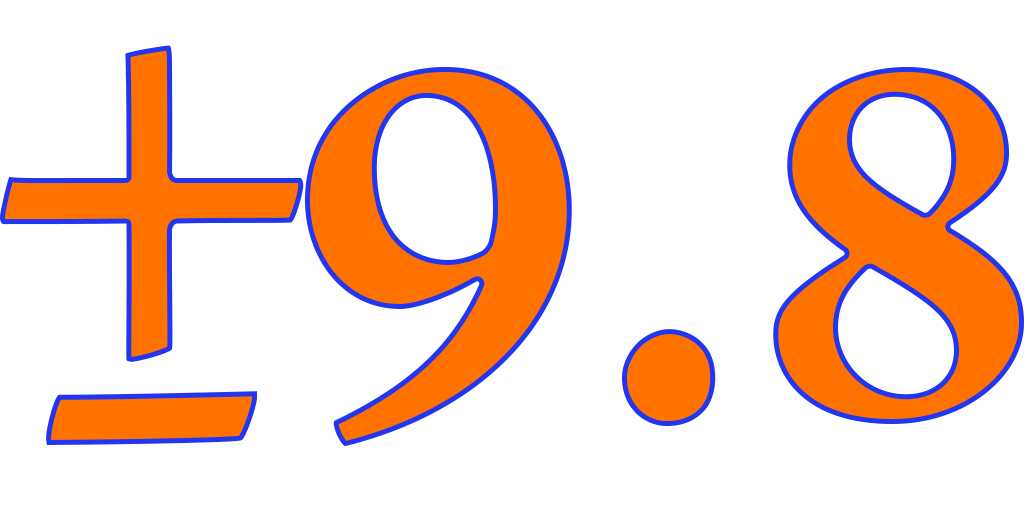
<style>
.page{position:relative;width:1024px;height:512px;background:#ffffff}
.page>*{position:absolute;margin:0}
.t1{font:583.3px "ArnoPro-SmbdCaption";color:#ff7200}
.t2{font:583.3px "ArnoPro-SmbdCaption";color:#ff7200;scale:1.5 1}
</style>
<div class="page">
<p class="t1" style="left:0px;top:45px;width:304px;height:317px">+</p>
<p class="t1" style="left:305px;top:66px;width:719px;height:381px">9.8</p>
<p class="t2" style="left:46px;top:391px;width:211px;height:54px">-</p>
</div>
